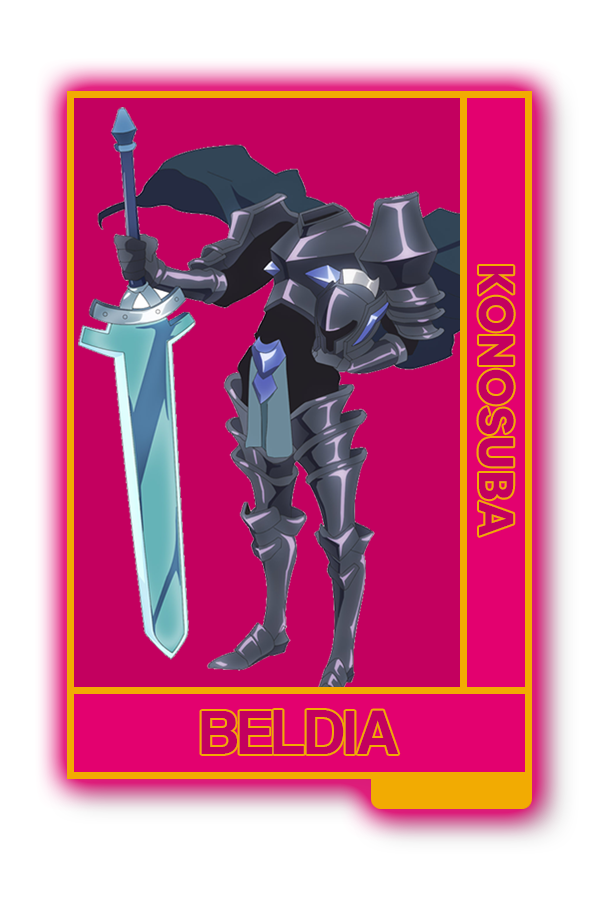
<style>
.page{position:relative;width:600px;height:900px;background:#c3005f}
.page>*{position:absolute;margin:0}
.t1{font:48.8px "MADETOMMY-Bold";color:#c3005f}
.t2{font:65.2px "CoolveticaRg-Regular";color:#c3005f}
</style>
<div class="page">
<p class="t1" style="left:478px;top:266px;width:36px;height:270px;rotate:90deg">KONOSUBA</p>
<p class="t2" style="left:201px;top:710px;width:198px;height:44px">BELDIA</p>
</div>
